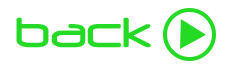
<style>
.page{position:relative;width:225px;height:65px;background:#ffffff}
.page>*{position:absolute;margin:0}
.t1{font:49.4px "Neuropol";color:#25da25}
</style>
<div class="page">
<p class="t1" style="left:16px;top:17px;width:135px;height:31px">back</p>
</div>
